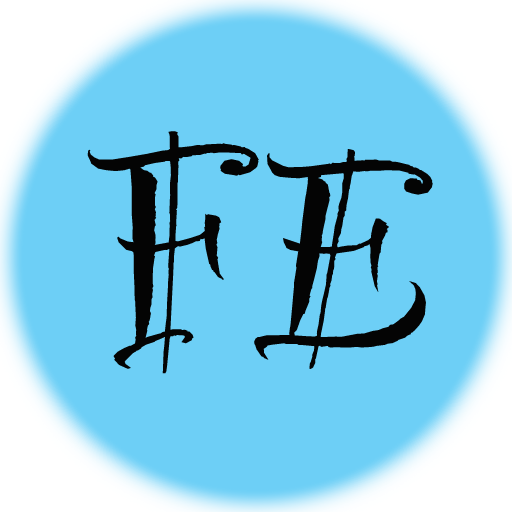
<style>
.page{position:relative;width:512px;height:512px;background:#6dcff6}
.page>*{position:absolute;margin:0}
.t1{font:300px "PartyLetPlain";color:#040404}
</style>
<div class="page">
<p class="t1" style="left:87px;top:131px;width:346px;height:243px">FE</p>
</div>
